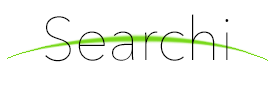
<style>
.page{position:relative;width:272px;height:92px;background:#ffffff}
.page>*{position:absolute;margin:0}
.t1{font:60px "AvenirNext-UltraLight";color:#000000}
</style>
<div class="page">
<p class="t1" style="left:45px;top:14px;width:184px;height:48px">Searchi</p>
</div>
